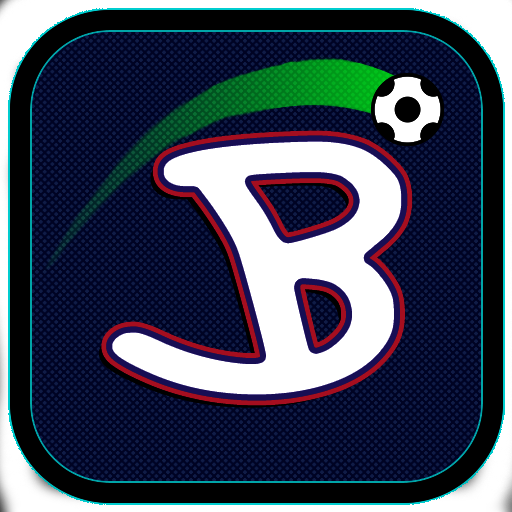
<style>
.page{position:relative;width:512px;height:512px}
.page>*{position:absolute;margin:0}
.t1{font:411.8px "Brutal_bounce-Regular";color:#ffffff;scale:1.29 1}
</style>
<div class="page">
<p class="t1" style="left:106px;top:135px;width:302px;height:266px">B</p>
</div>
